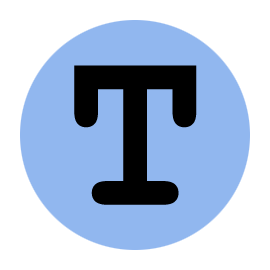
<style>
.page{position:relative;width:270px;height:270px;background:#91b7ef}
.page>*{position:absolute;margin:0}
.t1{font:234.8px "CourierNewPS-BoldMT";color:#000000;text-transform:uppercase}
</style>
<div class="page">
<p class="t1" style="left:74px;top:65px;width:123px;height:140px">T</p>
</div>
